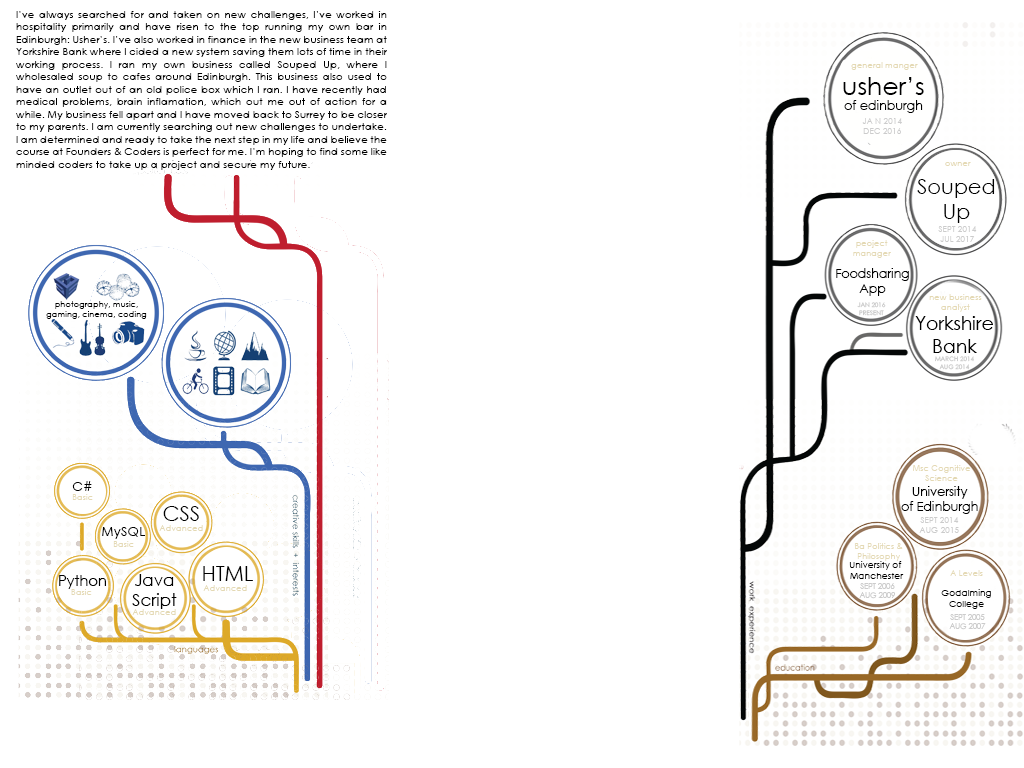
<style>
.page{position:relative;width:1024px;height:768px;background:#ffffff}
.page>*{position:absolute;margin:0}
.t1{font:10.4px "CenturyGothic";color:#000000}
.t2{font:8.4px "CenturyGothic";color:#e4d9b4}
.t3{font:12.5px "CenturyGothic";color:#000000}
.t4{font:25px "CenturyGothic";color:#000000}
.t5{font:8.3px "CenturyGothic";color:#cccccc}
.t6{font:20.8px "CenturyGothic";color:#000000}
.t7{font:8.3px "CenturyGothic";color:#000000}
.t8{font:6.2px "CenturyGothic";color:#cccccc}
.t9{font:18.8px "CenturyGothic";color:#000000}
.t10{font:13.3px "CenturyGothic";color:#000000}
.t11{font:9.2px "CenturyGothic";color:#000000}
.t12{font:14.6px "CenturyGothic";color:#000000}
.t13{font:16.7px "CenturyGothic";color:#000000}
.t14{font:7.5px "CenturyGothic";color:#cccccc}
</style>
<div class="page">
<p class="t1" style="left:16px;top:11px;width:371px;height:159px;text-align:justify">I’ve always searched for and taken on new challenges, I’ve worked in hospitality primarily and have risen to the top running my own bar in Edinburgh: Usher’s. I’ve also worked in finance in the new business team at Yorkshire Bank where I cided a new system saving them lots of time in their working process. I ran my own business called Souped Up, where I wholesaled soup to cafes around Edinburgh. This business also used to have an outlet out of an old police box which I ran. I have recently had medical problems, brain inflamation, which out me out of action for a while. My business fell apart and I have moved back to Surrey to be closer to my parents. I am currently searching out new challenges to undertake. I am determined and ready to take the next step in my life and believe the course at Founders &amp; Coders is perfect for me. I’m hoping to find some like minded coders to take up a project and secure my future.</p>
<p class="t2" style="left:851px;top:62px;width:67px;height:8px">general manger</p>
<p class="t3" style="left:843px;top:77px;width:81px;height:36px;text-align:center"><span class="t4">usher’s<br></span>of edinburgh</p>
<p class="t5" style="left:862px;top:118px;width:40px;height:16px;text-align:center">JA N 2014<br>DEC 2016</p>
<p class="t2" style="left:945px;top:162px;width:26px;height:4px">owner</p>
<p class="t6" style="left:917px;top:179px;width:78px;height:44px;text-align:center">Souped<br>Up</p>
<p class="t5" style="left:938px;top:226px;width:39px;height:16px;text-align:center">SEPT 2014<br>JUL 2017</p>
<p class="t2" style="left:853px;top:240px;width:38px;height:18px;text-align:center">peoject<br>manager</p>
<p class="t3" style="left:836px;top:268px;width:73px;height:28px;text-align:center">Foodsharing<br>App</p>
<p class="t2" style="left:929px;top:294px;width:53px;height:18px;text-align:center">new business<br>analyst</p>
<p class="t7" style="left:46px;top:301px;width:101px;height:18px;text-align:center">photography, music,<br>gaming, cinema, coding</p>
<p class="t8" style="left:857px;top:302px;width:29px;height:14px;text-align:center">JAN 2016<br>PRESENT</p>
<p class="t9" style="left:915px;top:316px;width:78px;height:37px;text-align:center">Yorkshire<br>Bank</p>
<p class="t8" style="left:935px;top:356px;width:39px;height:14px;text-align:center">MARCH 2014<br>AUG 2014</p>
<p class="t2" style="left:913px;top:465px;width:58px;height:16px;text-align:center">Msc Cognitive<br>Science</p>
<p class="t10" style="left:72px;top:481px;width:20px;height:10px">C#</p>
<p class="t3" style="left:901px;top:486px;width:77px;height:28px;text-align:center">University<br>of Edinburgh</p>
<p class="t2" style="left:72px;top:494px;width:21px;height:6px">Basic</p>
<p class="t6" style="left:163px;top:506px;width:36px;height:15px">CSS</p>
<p class="t5" style="left:919px;top:517px;width:40px;height:16px;text-align:center">SEPT 2014<br>AUG 2015</p>
<p class="t10" style="left:102px;top:527px;width:43px;height:12px">MySQL</p>
<p class="t2" style="left:159px;top:525px;width:44px;height:6px">Advanced</p>
<p class="t2" style="left:113px;top:541px;width:21px;height:6px">Basic</p>
<p class="t2" style="left:855px;top:543px;width:48px;height:18px;text-align:center">Ba Politics &amp;<br>Philosophy</p>
<p class="t6" style="left:203px;top:566px;width:50px;height:15px">HTML</p>
<p class="t11" style="left:849px;top:561px;width:55px;height:18px;text-align:center">University of <br>Manchester</p>
<p class="t12" style="left:59px;top:575px;width:47px;height:14px">Python</p>
<p class="t13" style="left:132px;top:574px;width:45px;height:35px;text-align:center">Java<br>Script</p>
<p class="t2" style="left:950px;top:570px;width:33px;height:6px">A Levels</p>
<p class="t2" style="left:71px;top:589px;width:21px;height:6px">Basic</p>
<p class="t2" style="left:203px;top:585px;width:44px;height:6px">Advanced</p>
<p class="t14" style="left:859px;top:583px;width:36px;height:16px;text-align:center">SEPT 2006<br>AUG 2009</p>
<p class="t11" style="left:941px;top:589px;width:50px;height:20px;text-align:center">Godalming<br>College</p>
<p class="t2" style="left:132px;top:609px;width:44px;height:6px">Advanced</p>
<p class="t14" style="left:949px;top:614px;width:37px;height:16px;text-align:center">SEPT 2005<br>AUG 2007</p>
</div>
